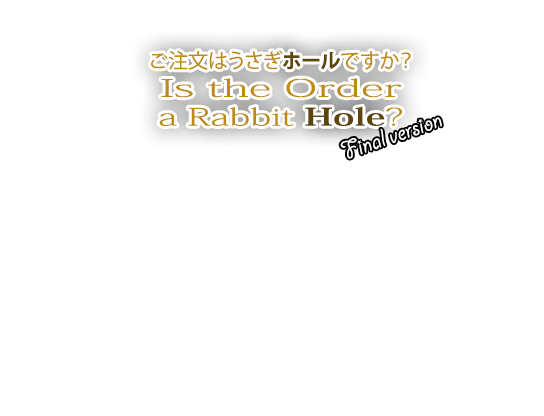
<style>
.page{position:relative;width:544px;height:416px;background:#ffffff}
.page>*{position:absolute;margin:0}
.t1{font:24px "KozMinPr6N-ExtraLight";color:#bd8b13;scale:1.92 1}
.t2{font:20px "KozGoPr6N-Regular";color:#bd8b13}
.t3{font:20px "KozGoPr6N-Bold";color:#5e4509}
.t4{font:24px "KozMinPr6N-ExtraLight";color:#bd8b13;scale:1.57 1}
.t5{font:24px "KozMinPr6N-Bold";color:#5e4509;scale:1.57 1}
</style>
<div class="page">
<p class="t1" style="left:151px;top:50px;width:260px;height:76px;text-align:center"><span class="t2">ご注文はうさぎ</span><span class="t3">ホール</span><span class="t2">ですか？<br></span>Is the Order<br><span class="t4">a Rabbit </span><span class="t5">Hole</span><span class="t4">?</span></p>
</div>
